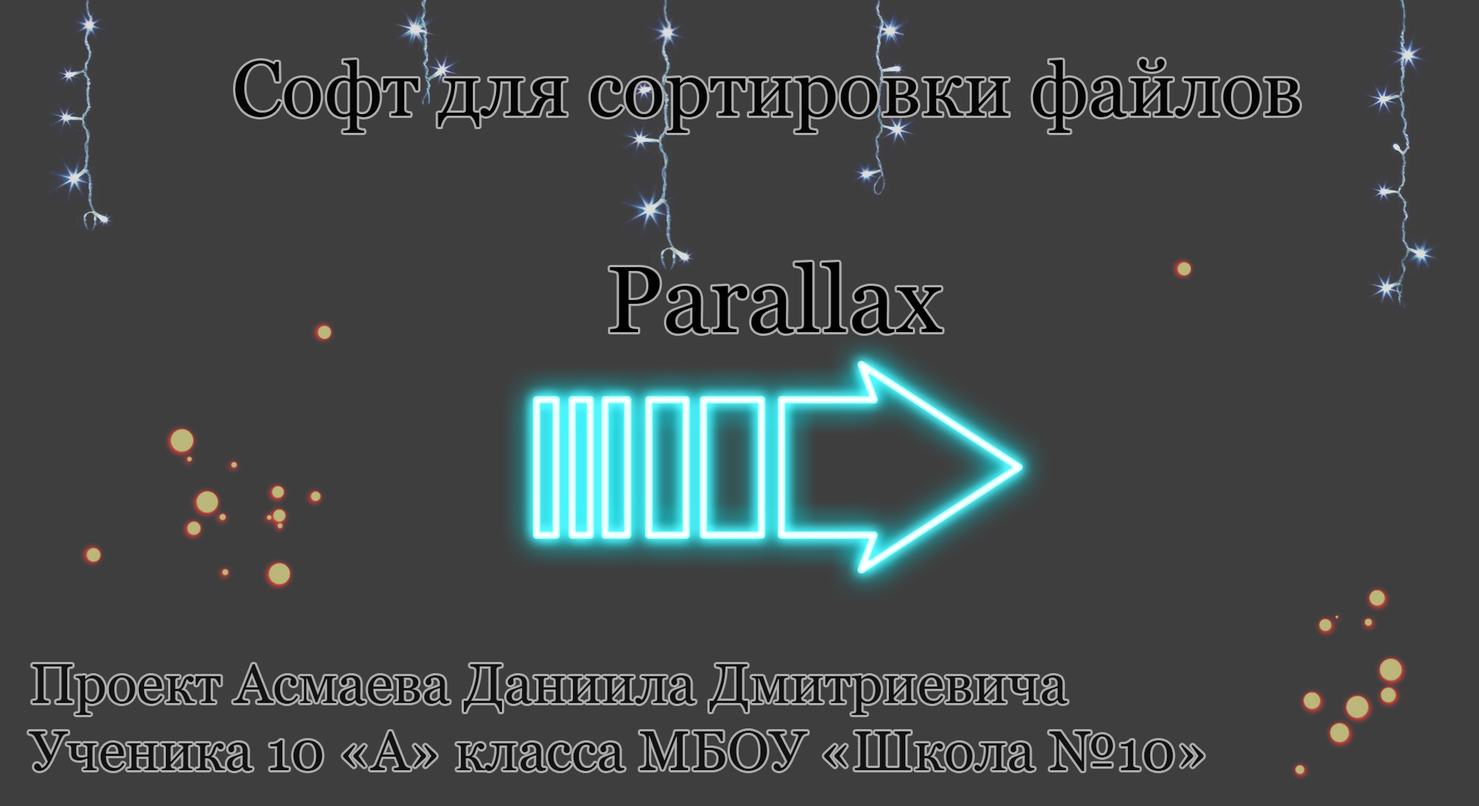
<style>
.page{position:relative;width:1479px;height:806px;background:#3e3e3e}
.page>*{position:absolute;margin:0}
.t1{font:77.8px "Georgia";color:#050505}
.t2{font:93.3px "Georgia";color:#000000}
.t3{font:56px "Georgia";color:#131313}
</style>
<div class="page">
<p class="t1" style="left:235px;top:59px;width:1065px;height:74px">Софт для сортировки файлов</p>
<p class="t2" style="left:609px;top:262px;width:333px;height:72px">Parallax</p>
<p class="t3" style="left:28px;top:665px;width:1176px;height:106px">Проект Асмаева Даниила Дмитриевича<br>Ученика 10 «А» класса МБОУ «Школа №10»</p>
</div>
